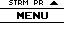
<style>
.page{position:relative;width:64px;height:32px;background:#ffffff}
.page>*{position:absolute;margin:0}
.t1{font:8px "04b03";color:#000000;scale:1.06 1}
.t2{font:14px "ArcadeClassic";color:#000000;scale:1.05 1}
</style>
<div class="page">
<p class="t1" style="left:9px;top:0px;width:34px;height:5px">STRM PR</p>
<p class="t2" style="left:17px;top:12px;width:31px;height:7px">MENU</p>
</div>
